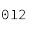
<style>
.page{position:relative;width:32px;height:32px;background:#ffffff}
.page>*{position:absolute;margin:0}
.t1{font:14px "SourceCodePro-Master0";color:#000000}
</style>
<div class="page">
<p class="t1" style="left:2px;top:9px;width:24px;height:11px">012</p>
</div>
